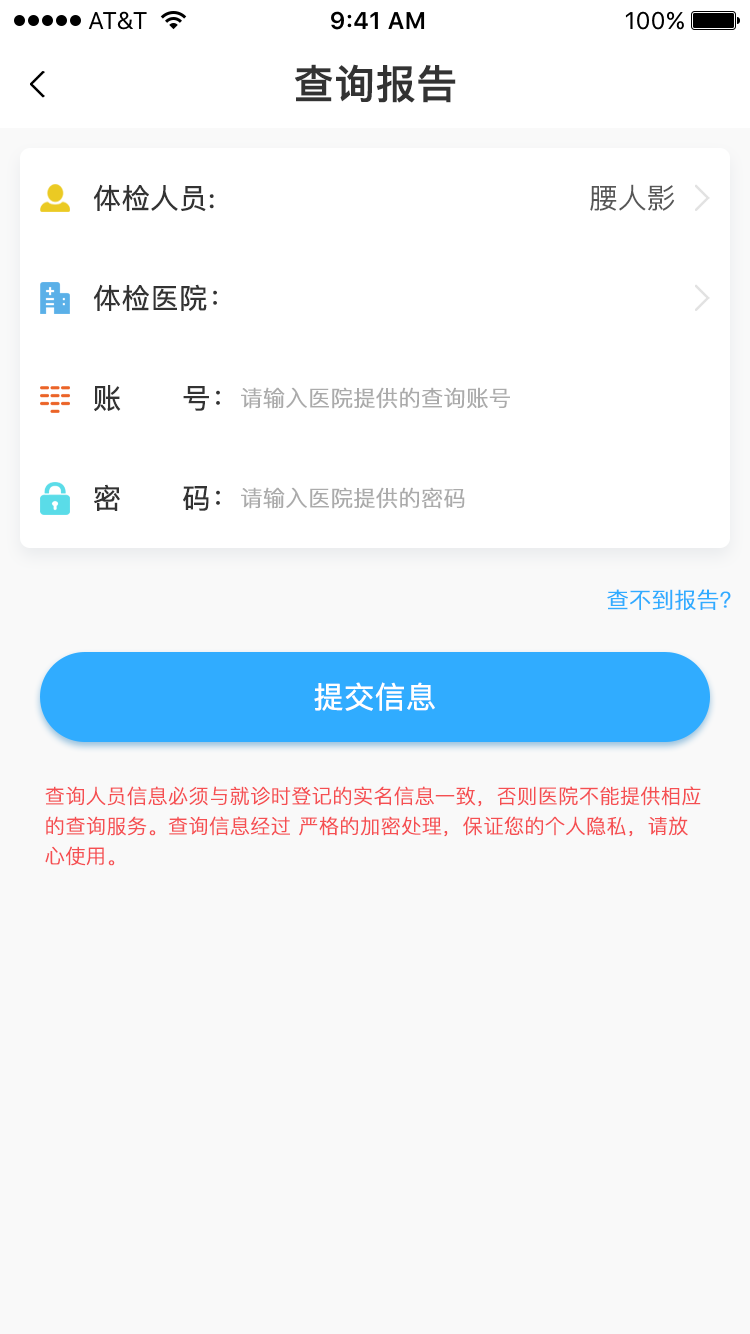
<style>
.page{position:relative;width:750px;height:1334px;background:#f9f9f9}
.page>*{position:absolute;margin:0}
.t1{font:40px "PingFangSC-Medium";color:#333333;font-weight:bold}
.t2{font:28px "PingFangSC-Regular";color:#333333;font-weight:bold}
.t3{font:28px "PingFangSC-Light";color:#575757;font-weight:bold}
.t4{font:22px "PingFangSC-Light";color:#ababab;font-weight:bold}
.t5{font:22px "PingFangSC-Light";color:#30acff;font-weight:bold}
.t6{font:30px "PingFangSC-Regular";color:#ffffff;font-weight:bold}
.t7{font:20px/30px "PingFangSC-Light";color:#f54f52;font-weight:bold}
</style>
<div class="page">
<p class="t1" style="left:295px;top:64px;width:161px;height:39px">查询报告</p>
<p class="t2" style="left:93px;top:184px;width:121px;height:28px">体检人员:</p>
<p class="t3" style="left:590px;top:184px;width:85px;height:27px">腰人影</p>
<p class="t2" style="left:93px;top:284px;width:124px;height:27px">体检医院：</p>
<p class="t2" style="left:94px;top:385px;width:126px;height:27px">账      号：</p>
<p class="t4" style="left:241px;top:387px;width:269px;height:22px">请输入医院提供的查询账号</p>
<p class="t2" style="left:94px;top:484px;width:126px;height:27px">密      码：</p>
<p class="t4" style="left:241px;top:487px;width:224px;height:22px">请输入医院提供的密码</p>
<p class="t5" style="left:607px;top:589px;width:124px;height:21px">查不到报告?</p>
<p class="t6" style="left:314px;top:682px;width:121px;height:29px">提交信息</p>
<p class="t7" style="left:45px;top:786px;width:656px;height:80px">查询人员信息必须与就诊时登记的实名信息一致，否则医院不能提供相应的查询服务。查询信息经过 严格的加密处理，保证您的个人隐私，请放心使用。</p>
</div>
